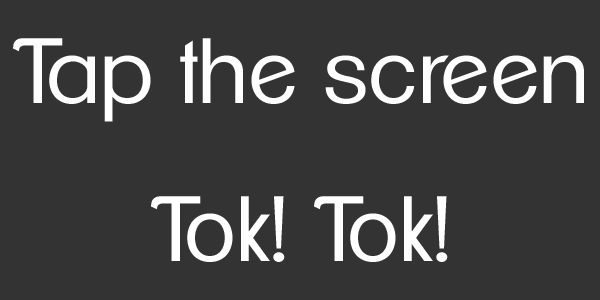
<style>
.page{position:relative;width:600px;height:300px;background:#333333}
.page>*{position:absolute;margin:0}
.t1{font:90px "ClementePDag-Book";color:#ffffff}
</style>
<div class="page">
<p class="t1" style="left:13px;top:38px;width:571px;height:224px;text-align:center">Tap the screen<br>Tok! Tok!</p>
</div>
